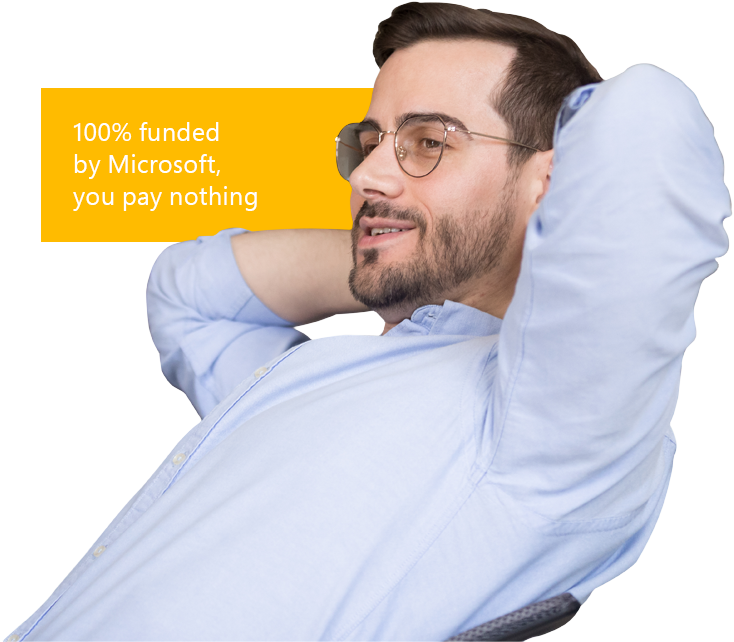
<style>
.page{position:relative;width:734px;height:642px;background:#ffffff}
.page>*{position:absolute;margin:0}
.t1{font:25.1px/32px "SegoePro";letter-spacing:0.02em;color:#ffffff}
</style>
<div class="page">
<p class="t1" style="left:73px;top:122px;width:184px;height:89px">100% funded <br>by Microsoft, <br>you pay nothing</p>
</div>
